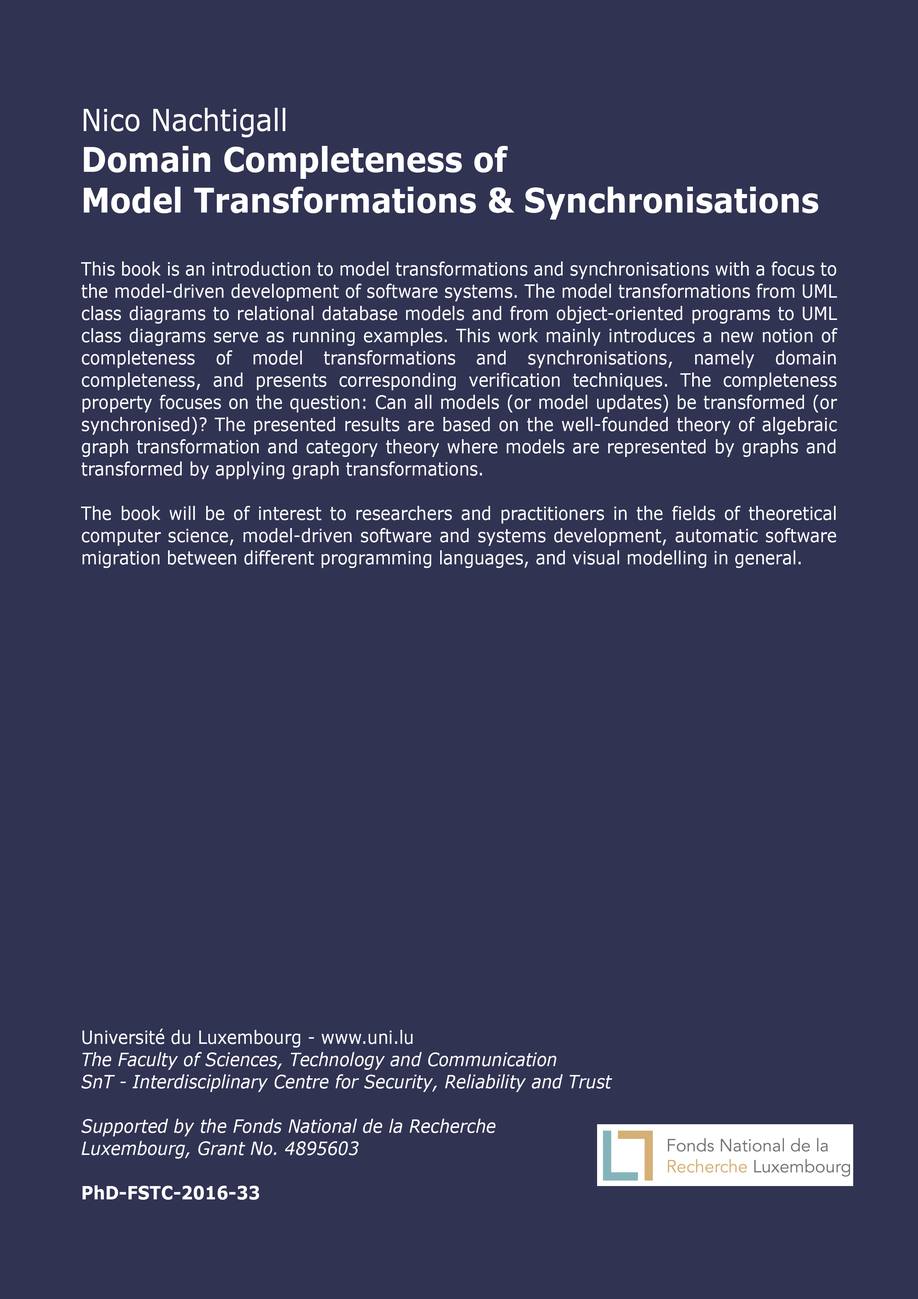
<style>
.page{position:relative;width:918px;height:1299px;background:#313353}
.page>*{position:absolute;margin:0}
.t1{font:18.5px "Verdana";color:#ffffff;scale:0.9 1}
.t2{font:30.9px "Verdana";color:#ffffff;scale:0.9 1}
.t3{font:33.9px "Verdana-Bold";color:#ffffff;scale:0.9 1}
.t4{font:18.5px "Verdana-Italic";color:#ffffff;scale:0.9 1}
.t5{font:18.5px "Verdana-Bold";color:#ffffff;scale:0.9 1}
</style>
<div class="page">
<p class="t1" style="left:81px;top:108px;width:757px;height:1092px;text-align:justify"><span class="t2">Nico Nachtigall<br></span><span class="t3">Domain Completeness of <br>Model Transformations &amp; Synchronisations<br><br></span>This book is an introduction to model transformations and synchronisations with a focus to the model-driven development of software systems. The model transformations from UML class diagrams to relational database models and from object-oriented programs to UML class diagrams serve as running examples. This work mainly introduces a new notion of completeness of model transformations and synchronisations, namely domain completeness, and presents corresponding verification techniques. The completeness property focuses on the question: Can all models (or model updates) be transformed (or synchronised)? The presented results are based on the well-founded theory of algebraic graph transformation and category theory where models are represented by graphs and transformed by applying graph transformations.<br><br>The book will be of interest to researchers and practitioners in the fields of theoretical computer science, model-driven software and systems development, automatic software migration between different programming languages, and visual modelling in general.<br><br><br><br><br><br><br><br><br><br><br><br><br><br><br><br><br><br><br><br>Université du Luxembourg - www.uni.lu<br><span class="t4">The Faculty of Sciences, Technology and Communication<br>SnT - Interdisciplinary Centre for Security, Reliability and Trust<br><br>Supported by the Fonds National de la Recherche<br>Luxembourg, Grant No. 4895603<br><br></span><span class="t5">PhD-FSTC-2016-33</span></p>
</div>
